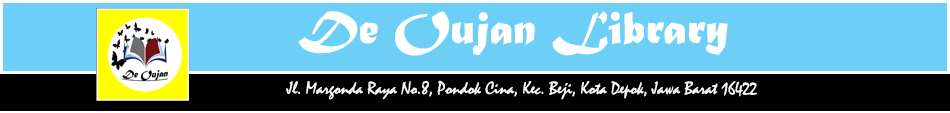
<style>
.page{position:relative;width:950px;height:113px;background:#6dcff6}
.page>*{position:absolute;margin:0}
.t1{font:48px "MaturaMTScriptCapitals";color:#ffffff}
.t2{font:18px "Mistral";color:#f9f9f9}
</style>
<div class="page">
<p class="t1" style="left:298px;top:11px;width:430px;height:45px">De Oujan Library</p>
<p class="t2" style="left:286px;top:80px;width:471px;height:20px">Jl. Margonda Raya No.8, Pondok Cina, Kec. Beji, Kota Depok, Jawa Barat 16422</p>
</div>
